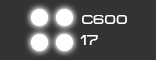
<style>
.page{position:relative;width:156px;height:60px;background:#333333}
.page>*{position:absolute;margin:0}
.t1{font:13px "MetroDF";color:#ffffff}
.t2{font:13.7px "MetroDF";color:#ffffff}
</style>
<div class="page">
<p class="t1" style="left:82px;top:15px;width:45px;height:9px">c600</p>
<p class="t2" style="left:80px;top:35px;width:18px;height:10px">17</p>
</div>
